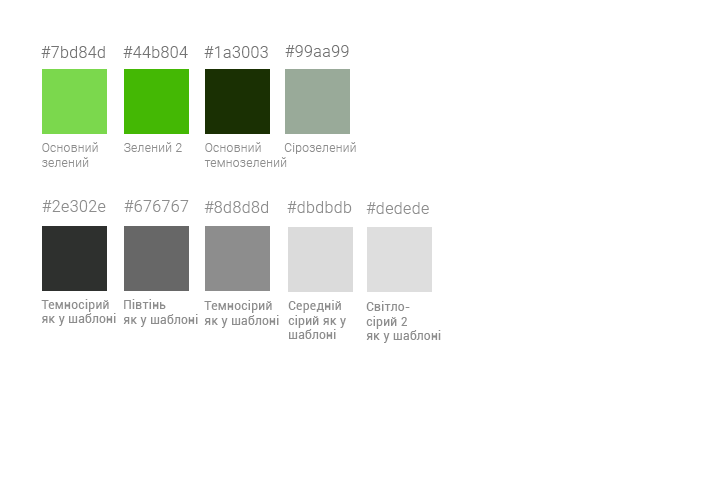
<style>
.page{position:relative;width:715px;height:500px;background:#ffffff}
.page>*{position:absolute;margin:0}
.t1{font:16px "Roboto-Light";letter-spacing:0.025em;color:#747474}
.t2{font:12px "Roboto-Light";letter-spacing:0.025em;color:#8d8d8d}
.t3{font:16px "Roboto-Light";letter-spacing:0.025em;color:#8d8d8d}
.t4{font:12px "Roboto-Regular";letter-spacing:0.025em;color:#8d8d8d}
</style>
<div class="page">
<p class="t1" style="left:41px;top:46px;width:64px;height:12px">#7bd84d</p>
<p class="t1" style="left:123px;top:46px;width:65px;height:12px">#44b804</p>
<p class="t1" style="left:204px;top:46px;width:64px;height:12px">#1a3003</p>
<p class="t1" style="left:285px;top:45px;width:64px;height:12px">#99aa99</p>
<p class="t2" style="left:42px;top:142px;width:56px;height:25px">Основний<br>зелений</p>
<p class="t2" style="left:124px;top:142px;width:58px;height:10px">Зелений 2</p>
<p class="t2" style="left:204px;top:142px;width:83px;height:25px">Основний<br>темнозелений</p>
<p class="t2" style="left:284px;top:142px;width:72px;height:12px">Сірозелений</p>
<p class="t3" style="left:42px;top:200px;width:64px;height:12px">#2e302e</p>
<p class="t3" style="left:124px;top:200px;width:65px;height:12px">#676767</p>
<p class="t3" style="left:204px;top:201px;width:64px;height:12px">#8d8d8d</p>
<p class="t3" style="left:287px;top:201px;width:65px;height:12px">#dbdbdb</p>
<p class="t3" style="left:366px;top:202px;width:63px;height:12px">#dedede</p>
<p class="t4" style="left:41px;top:299px;width:75px;height:27px">Темносірий<br>як у шаблоні</p>
<p class="t4" style="left:123px;top:299px;width:75px;height:28px">Півтінь <br>як у шаблоні</p>
<p class="t4" style="left:204px;top:300px;width:75px;height:28px">Темносірий<br>як у шаблоні</p>
<p class="t4" style="left:288px;top:300px;width:58px;height:39px">Середній <br>сірий як у <br>шаблоні</p>
<p class="t4" style="left:366px;top:301px;width:75px;height:42px">Світло-<br>сірий 2 <br>як у шаблоні</p>
</div>
